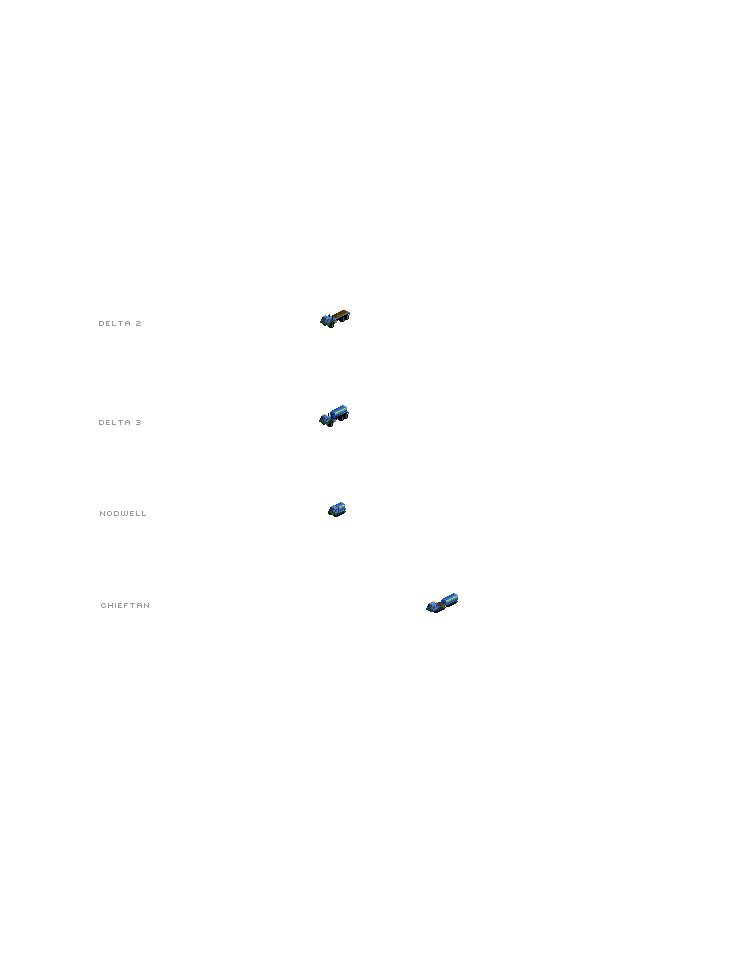
<style>
.page{position:relative;width:730px;height:971px;background:#ffffff}
.page>*{position:absolute;margin:0}
.t1{font:10px "Mini7";color:#999999}
</style>
<div class="page">
<p class="t1" style="left:99px;top:321px;width:42px;height:5px">Delta 2</p>
<p class="t1" style="left:99px;top:420px;width:42px;height:5px">Delta 3</p>
<p class="t1" style="left:100px;top:511px;width:46px;height:5px">Nodwell</p>
<p class="t1" style="left:101px;top:603px;width:48px;height:5px">Chieftan</p>
</div>
